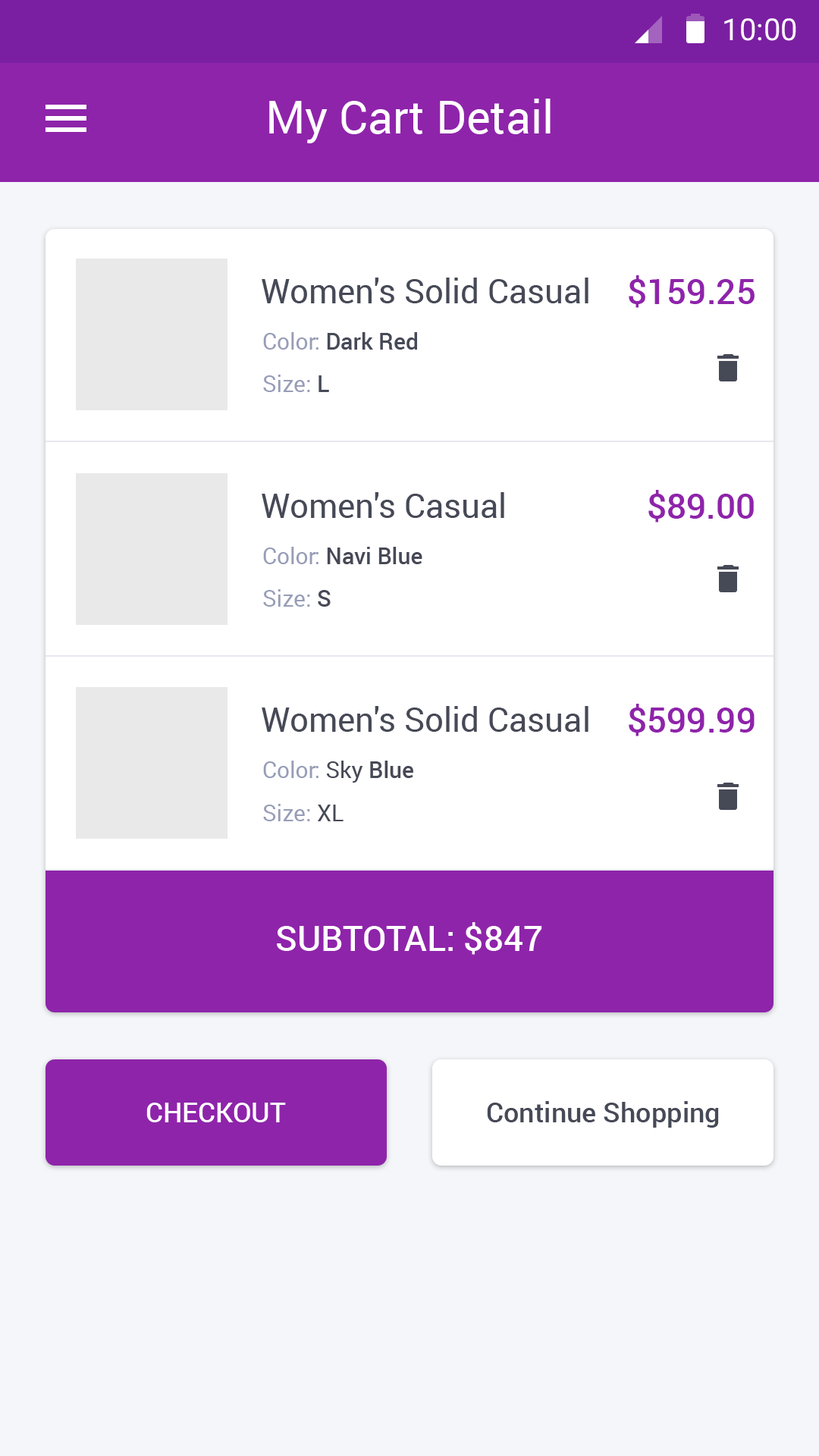
<style>
.page{position:relative;width:819px;height:1456px;background:#ffffff}
.page>*{position:absolute;margin:0}
.t1{font:30.3px "Roboto-Regular";color:#ffffff}
.t2{font:45.5px "Roboto-Regular";color:#ffffff}
.t3{font:33.4px "Roboto-Regular";color:#464956}
.t4{font:34.9px "Roboto-Medium";color:#8e24aa}
.t5{font:22.7px "Roboto-Medium";color:#464956}
.t6{font:22.7px "Roboto-Regular";color:#979db7}
.t7{font:22.7px "Roboto-Regular";color:#464956}
.t8{font:34.9px "Roboto-Medium";color:#ffffff}
.t9{font:27.3px "Roboto-Medium";color:#ffffff}
.t10{font:27.3px "Roboto-Medium";color:#464956}
</style>
<div class="page">
<p class="t1" style="left:724px;top:18px;width:72px;height:23px">10:00</p>
<p class="t2" style="left:269px;top:99px;width:282px;height:44px">My Cart Detail</p>
<p class="t3" style="left:262px;top:278px;width:326px;height:25px">Women's Solid Casual</p>
<p class="t4" style="left:629px;top:275px;width:126px;height:33px">$159.25</p>
<p class="t5" style="left:263px;top:332px;width:154px;height:18px"><span class="t6">Color: </span>Dark Red</p>
<p class="t6" style="left:263px;top:375px;width:66px;height:17px">Size: <span class="t5">L</span></p>
<p class="t3" style="left:262px;top:492px;width:242px;height:26px">Women's Casual</p>
<p class="t4" style="left:648px;top:490px;width:106px;height:32px">$89.00</p>
<p class="t5" style="left:263px;top:547px;width:159px;height:17px"><span class="t6">Color: </span>Navi Blue</p>
<p class="t6" style="left:263px;top:589px;width:68px;height:18px">Size: <span class="t5">S</span></p>
<p class="t3" style="left:262px;top:706px;width:326px;height:26px">Women's Solid Casual</p>
<p class="t4" style="left:629px;top:704px;width:126px;height:32px">$599.99</p>
<p class="t6" style="left:263px;top:761px;width:150px;height:22px">Color:<span class="t7"> Sky </span><span class="t5">Blue</span></p>
<p class="t6" style="left:263px;top:804px;width:81px;height:17px">Size:<span class="t7"> XL</span></p>
<p class="t8" style="left:277px;top:922px;width:265px;height:33px">SUBTOTAL: $847</p>
<p class="t9" style="left:146px;top:1103px;width:140px;height:19px">CHECKOUT</p>
<p class="t10" style="left:487px;top:1101px;width:232px;height:27px">Continue Shopping</p>
</div>
